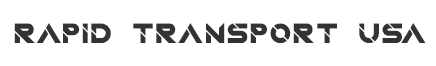
<style>
.page{position:relative;width:436px;height:66px;background:#ffffff}
.page>*{position:absolute;margin:0}
.t1{font:40px "QuantumRegular";letter-spacing:-0.005em;color:#333333}
</style>
<div class="page">
<p class="t1" style="left:14px;top:23px;width:412px;height:20px">rapid transport usa</p>
</div>
